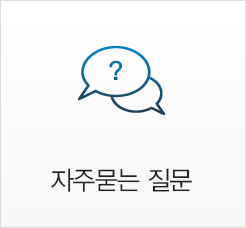
<style>
.page{position:relative;width:246px;height:228px}
.page>*{position:absolute;margin:0}
.t1{font:26px "YDVYGO32";letter-spacing:-0.025em;color:#222222;scale:0.96 1}
</style>
<div class="page">
<p class="t1" style="left:51px;top:168px;width:141px;height:24px">자주묻는 질문</p>
</div>
